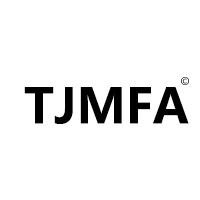
<style>
.page{position:relative;width:200px;height:200px;background:#ffffff}
.page>*{position:absolute;margin:0}
.t1{font:48px "MicrosoftYaHeiUI-Bold";color:#000000}
</style>
<div class="page">
<p class="t1" style="left:24px;top:87px;width:165px;height:37px">TJMFA</p>
</div>
